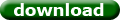
<style>
.page{position:relative;width:120px;height:20px}
.page>*{position:absolute;margin:0}
.t1{font:16.7px "Verdana-Bold";color:#ffffff}
</style>
<div class="page">
<p class="t1" style="left:14px;top:3px;width:90px;height:13px">download</p>
</div>
